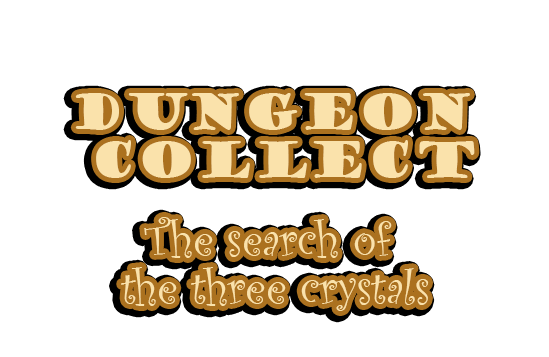
<style>
.page{position:relative;width:549px;height:357px;background:#ffffff}
.page>*{position:absolute;margin:0}
.t1{font:48px/48px "GoudyStout";color:#fae2ab}
.t2{font:48px/48px "CurlzMT";color:#fae2ab}
</style>
<div class="page">
<p class="t1" style="left:75px;top:93px;width:400px;height:85px;text-align:center">DUNGEON <br>COLLECT</p>
<p class="t2" style="left:121px;top:217px;width:308px;height:94px;text-align:center">The search of <br>the three crystals</p>
</div>
